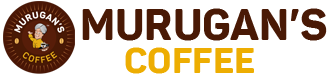
<style>
.page{position:relative;width:330px;height:75px;background:#ffffff}
.page>*{position:absolute;margin:0}
.t1{font:42.5px "Panton-Trial-ExtraBold";color:#491905}
.t2{font:35.8px "Panton-Trial-ExtraBold";color:#edad02}
</style>
<div class="page">
<p class="t1" style="left:82px;top:8px;width:245px;height:33px">MURUGAN’S</p>
<p class="t2" style="left:125px;top:47px;width:129px;height:27px">COFFEE</p>
</div>
